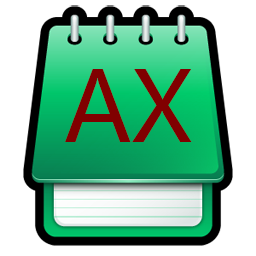
<style>
.page{position:relative;width:256px;height:256px;background:#ffffff}
.page>*{position:absolute;margin:0}
.t1{font:96px "MicrosoftYaHei";color:#800000}
</style>
<div class="page">
<p class="t1" style="left:65px;top:69px;width:127px;height:73px">AX</p>
</div>
